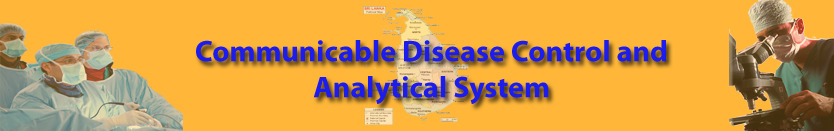
<style>
.page{position:relative;width:834px;height:131px;background:#ffb639}
.page>*{position:absolute;margin:0}
.t1{font:30px "MyriadPro-Bold";color:#1c1ced}
</style>
<div class="page">
<p class="t1" style="left:196px;top:40px;width:470px;height:64px;text-align:center">Communicable Disease Control and Analytical System</p>
</div>
